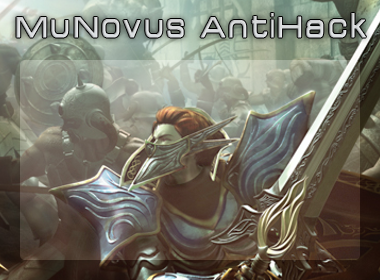
<style>
.page{position:relative;width:380px;height:280px}
.page>*{position:absolute;margin:0}
.t1{font:32px "Acens";letter-spacing:0.1em;color:#d1d1d1;font-weight:bold}
</style>
<div class="page">
<p class="t1" style="left:16px;top:13px;width:350px;height:25px">MuNovus AntiHack</p>
</div>
